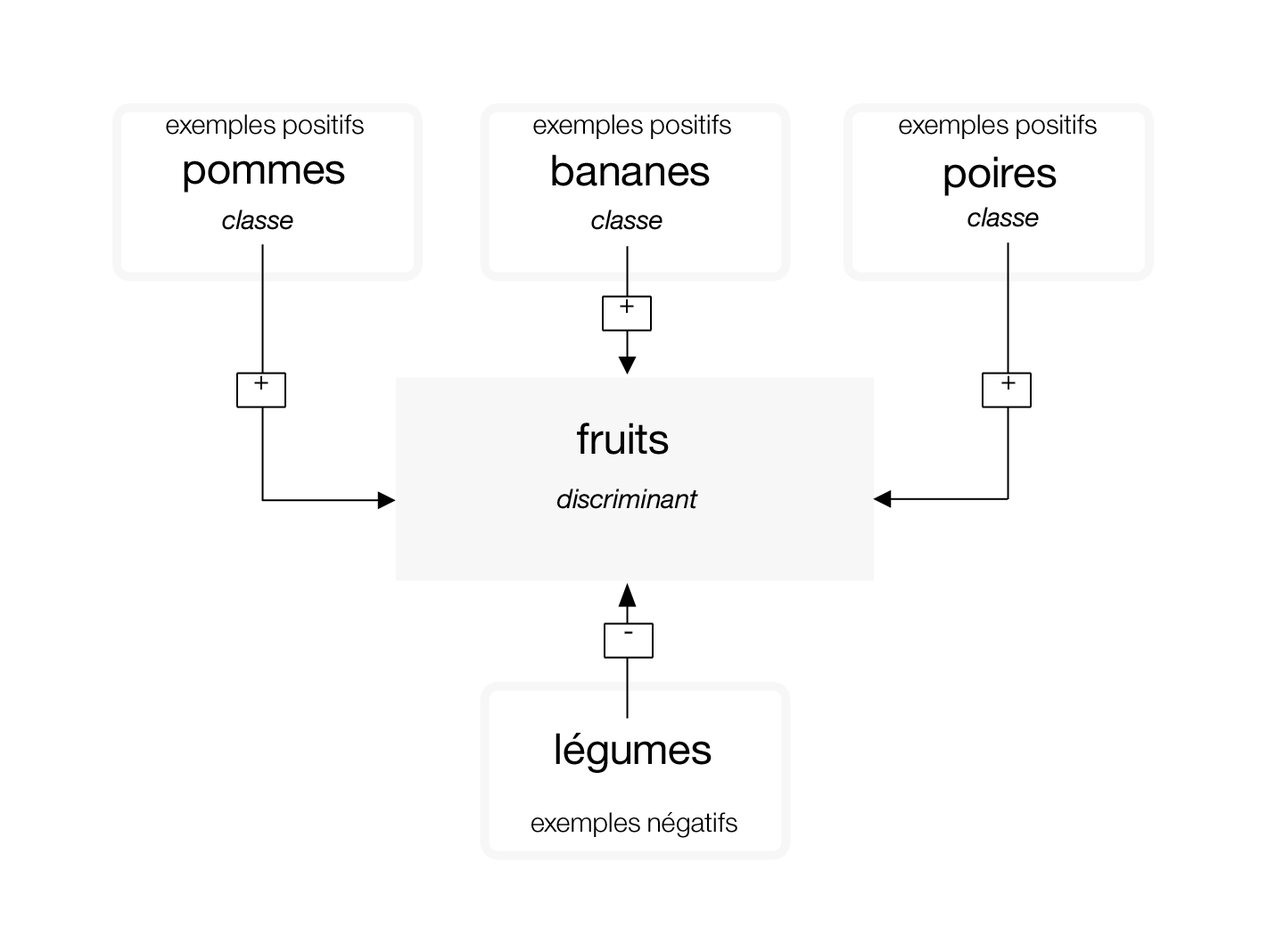
<style>
.page{position:relative;width:1284px;height:928px;background:#ffffff}
.page>*{position:absolute;margin:0}
.t1{font:26.8px "HelvNeueforIBM-Light";color:#000000}
.t2{font:42.8px "HelvNeueforIBM";color:#000000}
.t3{font:26.8px "HelvNeueforIBM-Italic";color:#000000}
.t4{font:26.8px "HelvNeueforIBM";color:#000000}
</style>
<div class="page">
<p class="t1" style="left:166px;top:114px;width:198px;height:25px">exemples positifs</p>
<p class="t1" style="left:533px;top:114px;width:198px;height:25px">exemples positifs</p>
<p class="t1" style="left:899px;top:114px;width:198px;height:25px">exemples positifs</p>
<p class="t2" style="left:184px;top:161px;width:161px;height:32px">pommes</p>
<p class="t2" style="left:552px;top:154px;width:158px;height:32px">bananes</p>
<p class="t2" style="left:945px;top:156px;width:112px;height:40px">poires</p>
<p class="t3" style="left:222px;top:210px;width:71px;height:20px">classe</p>
<p class="t3" style="left:591px;top:210px;width:72px;height:20px">classe</p>
<p class="t3" style="left:968px;top:207px;width:71px;height:20px">classe</p>
<p class="t4" style="left:620px;top:299px;width:14px;height:14px">+</p>
<p class="t4" style="left:254px;top:375px;width:14px;height:15px">+</p>
<p class="t4" style="left:1002px;top:375px;width:14px;height:15px">+</p>
<p class="t2" style="left:577px;top:423px;width:92px;height:32px">fruits</p>
<p class="t3" style="left:557px;top:489px;width:141px;height:20px">discriminant</p>
<p class="t4" style="left:624px;top:631px;width:9px;height:3px">-</p>
<p class="t2" style="left:556px;top:733px;width:156px;height:40px">légumes</p>
<p class="t1" style="left:532px;top:813px;width:206px;height:25px">exemples négatifs</p>
</div>
